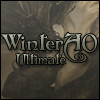
<style>
.page{position:relative;width:100px;height:100px}
.page>*{position:absolute;margin:0}
.t1{font:22px "Folkard"}
.t2{font:14px "Folkard"}
</style>
<div class="page">
<p class="t1" style="left:1px;top:32px;width:96px;height:31px">WinterAO</p>
<p class="t2" style="left:16px;top:53px;width:50px;height:13px">Ultimate</p>
</div>
